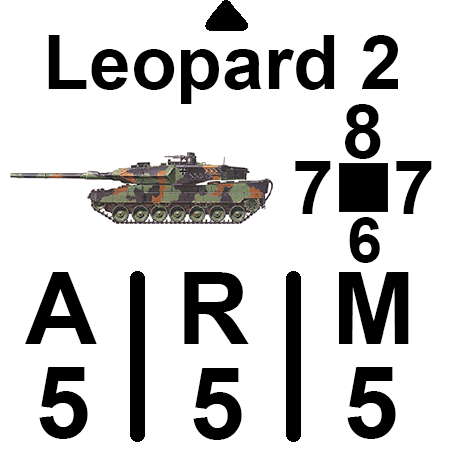
<style>
.page{position:relative;width:450px;height:450px;background:#ffffff}
.page>*{position:absolute;margin:0}
.t1{font:75px "Arial-BoldMT";color:#000000}
.t2{font:62.5px "Arial-BoldMT";color:#000000}
.t3{font:100px "Arial-BoldMT";color:#000000}
</style>
<div class="page">
<p class="t1" style="left:48px;top:35px;width:350px;height:69px">Leopard 2</p>
<p class="t1" style="left:345px;top:104px;width:36px;height:55px">8</p>
<p class="t1" style="left:295px;top:161px;width:36px;height:53px">7</p>
<p class="t1" style="left:396px;top:161px;width:36px;height:53px">7</p>
<p class="t2" style="left:349px;top:217px;width:31px;height:46px">6</p>
<p class="t3" style="left:25px;top:272px;width:384px;height:72px">A   R   M</p>
<p class="t3" style="left:39px;top:367px;width:49px;height:72px">5</p>
<p class="t3" style="left:193px;top:368px;width:49px;height:72px">5</p>
<p class="t3" style="left:347px;top:367px;width:49px;height:72px">5</p>
</div>
